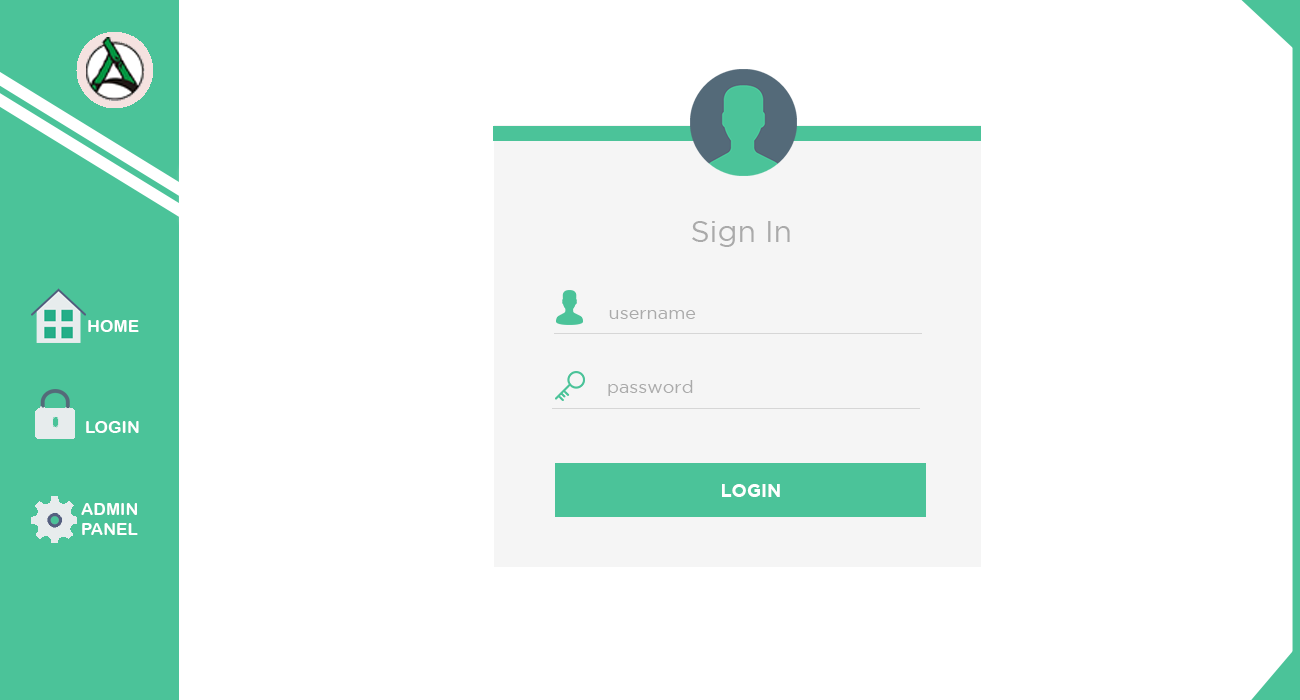
<style>
.page{position:relative;width:1300px;height:700px;background:#ffffff}
.page>*{position:absolute;margin:0}
.t1{font:30px "GothamBook";color:#aaaaaa}
.t2{font:18px "GothamBook";color:#aaaaaa}
.t3{font:17.1px "ArialRoundedMTBold";color:#ffffff}
.t4{font:18px "GothamBold";color:#ffffff}
</style>
<div class="page">
<p class="t1" style="left:692px;top:221px;width:98px;height:26px">Sign In</p>
<p class="t2" style="left:609px;top:310px;width:87px;height:9px">username</p>
<p class="t3" style="left:88px;top:320px;width:51px;height:12px">HOME</p>
<p class="t2" style="left:608px;top:380px;width:85px;height:16px">password</p>
<p class="t3" style="left:86px;top:421px;width:53px;height:12px">LOGIN</p>
<p class="t4" style="left:722px;top:484px;width:58px;height:13px">LOGIN</p>
<p class="t3" style="left:81px;top:503px;width:57px;height:32px">ADMIN<br>PANEL</p>
</div>
